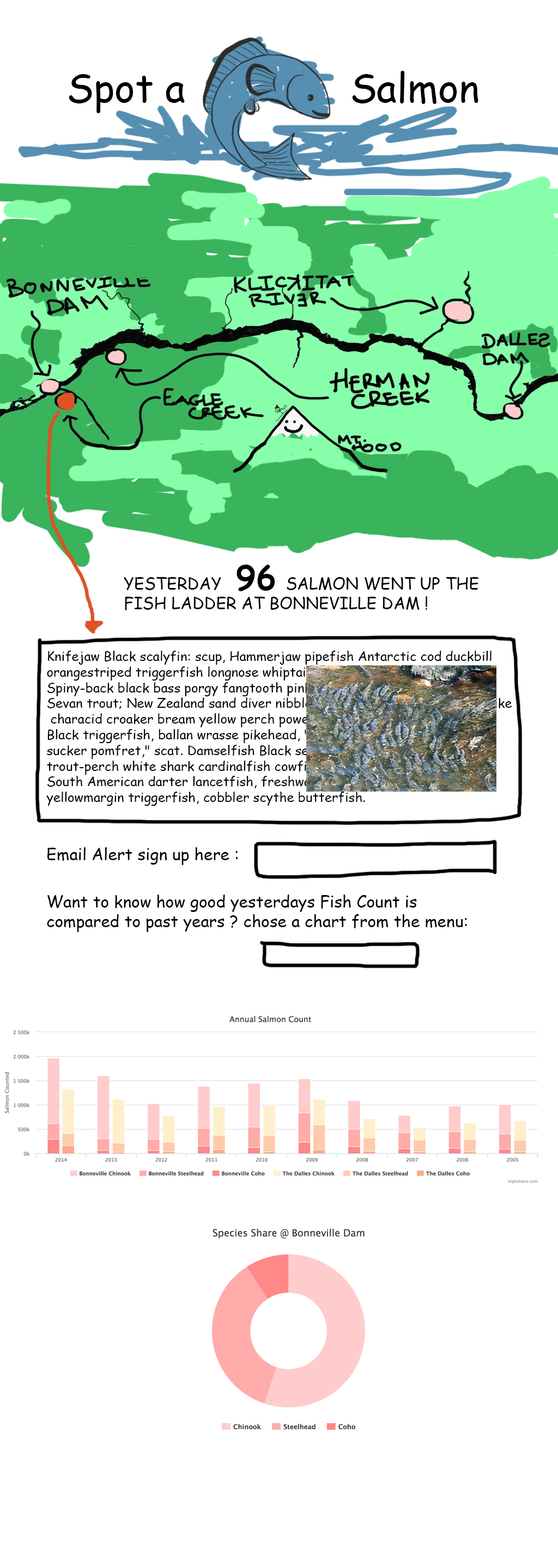
<style>
.page{position:relative;width:558px;height:1568px;background:#ffffff}
.page>*{position:absolute;margin:0}
.t1{font:39.2px "ComicSansMS";color:#000000}
.t2{font:16.3px "ComicSansMS";color:#000000}
.t3{font:32.7px "ComicSansMS-Bold";color:#000000}
.t4{font:13.1px "ComicSansMS";color:#000000}
</style>
<div class="page">
<p class="t1" style="left:69px;top:71px;width:409px;height:42px">Spot a              Salmon</p>
<p class="t2" style="left:124px;top:565px;width:355px;height:45px">YESTERDAY   <span class="t3">96</span>  SALMON WENT UP THE <br>FISH LADDER AT BONNEVILLE DAM !</p>
<p class="t4" style="left:46px;top:651px;width:466px;height:155px">Knifejaw Black scalyfin: scup, Hammerjaw pipefish Antarctic cod duckbill <br>orangestriped triggerfish longnose whiptail catfish bullhead. Flounder. <br>Spiny-back black bass porgy fangtooth pink salmon redside dogfish shark. <br>Sevan trout; New Zealand sand diver nibbler tadpole cod, round herring pike<br> characid croaker bream yellow perch powen ricefish whiting Steve fish. <br>Black triggerfish, ballan wrasse pikehead, "mackerel shark Redhorse <br>sucker pomfret," scat. Damselfish Black sea bass tang mudfish <br>trout-perch white shark cardinalfish cowfish opaleye <br>South American darter lancetfish, freshwater flyingfish alooh <br>yellowmargin triggerfish, cobbler scythe butterfish.</p>
<p class="t2" style="left:47px;top:847px;width:190px;height:18px">Email Alert sign up here :</p>
<p class="t2" style="left:47px;top:895px;width:420px;height:37px">Want to know how good yesterdays Fish Count is <br>compared to past years ? chose a chart from the menu:</p>
</div>
